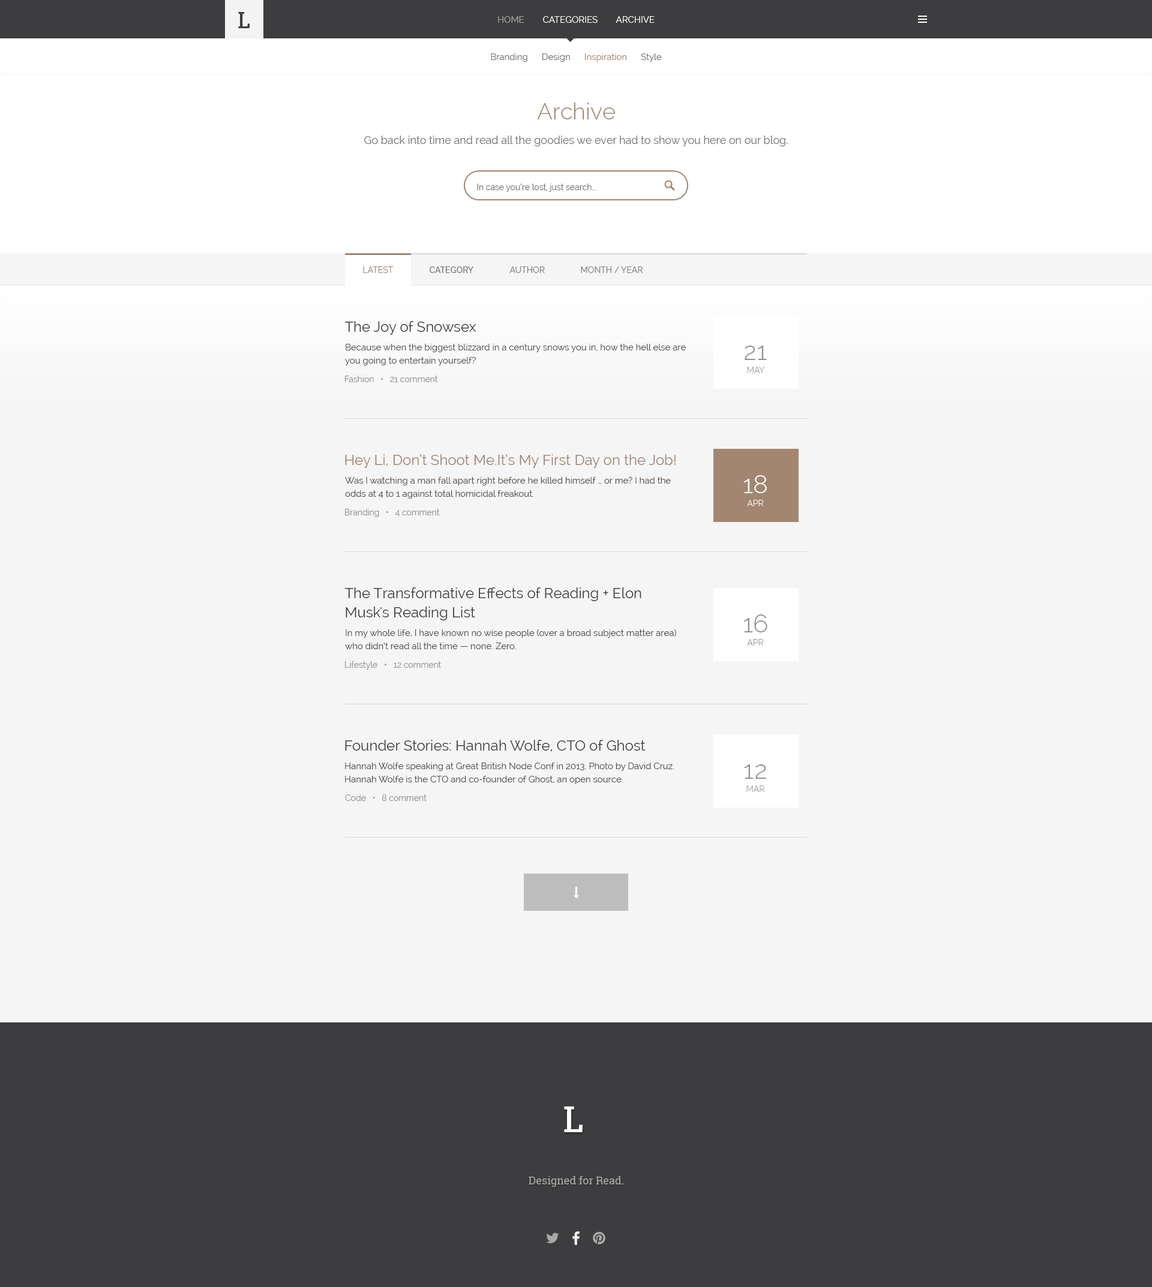
<style>
.page{position:relative;width:1152px;height:1287px;background:#f5f5f5}
.page>*{position:absolute;margin:0}
.t1{font:9px "Raleway";color:#ffffff}
.t2{font:9px "Raleway";color:#a8a8a8}
.t3{font:9px "Raleway";color:#6d6d70}
.t4{font:9px "Raleway";color:#a28671}
.t5{font:22.8px "Raleway-Light";color:#a28671}
.t6{font:10.8px "Raleway";color:#787878}
.t7{font:8.4px "Raleway";color:#717171}
.t8{font:8.4px "Raleway";color:#a28671}
.t9{font:8.4px "Raleway-Medium";color:#787878}
.t10{font:8.4px "Raleway";color:#787878}
.t11{font:14.4px "Raleway";color:#3d3d3f}
.t12{font:9px/13.2px "Raleway";color:#4d4d4f}
.t13{font:25.2px "Raleway-Light";color:#909091}
.t14{font:8.4px "Raleway";color:#919191}
.t15{font:8.4px "Raleway-Light";color:#909091}
.t16{font:14.4px "Raleway";color:#a28671}
.t17{font:25.2px "Raleway-Light";color:#ffffff}
.t18{font:8.4px "Raleway-Light";color:#ffffff}
.t19{font:14.4px/19.2px "Raleway";color:#3d3d3f}
</style>
<div class="page">
<p class="t1" style="left:498px;top:16px;width:157px;height:7px"><span class="t2">HOME</span>        CATEGORIES        ARCHIVE</p>
<p class="t3" style="left:491px;top:53px;width:171px;height:9px">Branding      Design      <span class="t4">Inspiration </span>     Style</p>
<p class="t5" style="left:537px;top:103px;width:79px;height:16px">Archive</p>
<p class="t6" style="left:364px;top:136px;width:424px;height:10px">Go back into time and read all the goodies we ever had to show you here on our blog.</p>
<p class="t7" style="left:477px;top:184px;width:119px;height:8px">In case you’re lost, just search...</p>
<p class="t8" style="left:363px;top:266px;width:31px;height:7px">LATEST</p>
<p class="t9" style="left:429px;top:266px;width:44px;height:7px">CATEGORY</p>
<p class="t10" style="left:509px;top:266px;width:36px;height:7px">AUTHOR</p>
<p class="t10" style="left:581px;top:266px;width:62px;height:7px">MONTH / YEAR</p>
<p class="t11" style="left:344px;top:321px;width:132px;height:14px">The Joy of Snowsex</p>
<p class="t12" style="left:345px;top:344px;width:341px;height:21px">Because when the biggest blizzard in a century snows you in, how the hell else are you going to entertain yourself?</p>
<p class="t13" style="left:745px;top:346px;width:22px;height:14px">21</p>
<p class="t14" style="left:345px;top:376px;width:93px;height:6px">Fashion   •   21 comment</p>
<p class="t15" style="left:747px;top:367px;width:18px;height:6px">MAY</p>
<p class="t16" style="left:345px;top:454px;width:331px;height:14px">Hey Li, Don’t Shoot Me.It’s My First Day on the Job!</p>
<p class="t12" style="left:345px;top:477px;width:326px;height:22px">Was I watching a man fall apart right before he killed himself … or me? I had the odds at 4 to 1 against total homicidal freakout.</p>
<p class="t17" style="left:743px;top:475px;width:24px;height:18px">18</p>
<p class="t14" style="left:345px;top:509px;width:95px;height:8px">Branding   •   4 comment</p>
<p class="t18" style="left:747px;top:500px;width:17px;height:6px">APR</p>
<p class="t19" style="left:344px;top:587px;width:297px;height:33px">The Transformative Effects of Reading + Elon Musk's Reading List</p>
<p class="t13" style="left:743px;top:614px;width:24px;height:18px">16</p>
<p class="t12" style="left:345px;top:629px;width:331px;height:20px">In my whole life, I have known no wise people (over a broad subject matter area) who didn’t read all the time — none. Zero.</p>
<p class="t15" style="left:747px;top:639px;width:17px;height:7px">APR</p>
<p class="t14" style="left:345px;top:661px;width:97px;height:9px">Lifestyle   •   12 comment</p>
<p class="t11" style="left:345px;top:740px;width:301px;height:12px">Founder Stories: Hannah Wolfe, CTO of Ghost</p>
<p class="t12" style="left:345px;top:763px;width:329px;height:21px">Hannah Wolfe speaking at Great British Node Conf in 2013. Photo by David Cruz. Hannah Wolfe is the CTO and co-founder of Ghost, an open source.</p>
<p class="t13" style="left:744px;top:764px;width:22px;height:15px">12</p>
<p class="t15" style="left:746px;top:785px;width:18px;height:7px">MAR</p>
<p class="t14" style="left:345px;top:794px;width:82px;height:7px">Code   •   8 comment</p>
</div>
